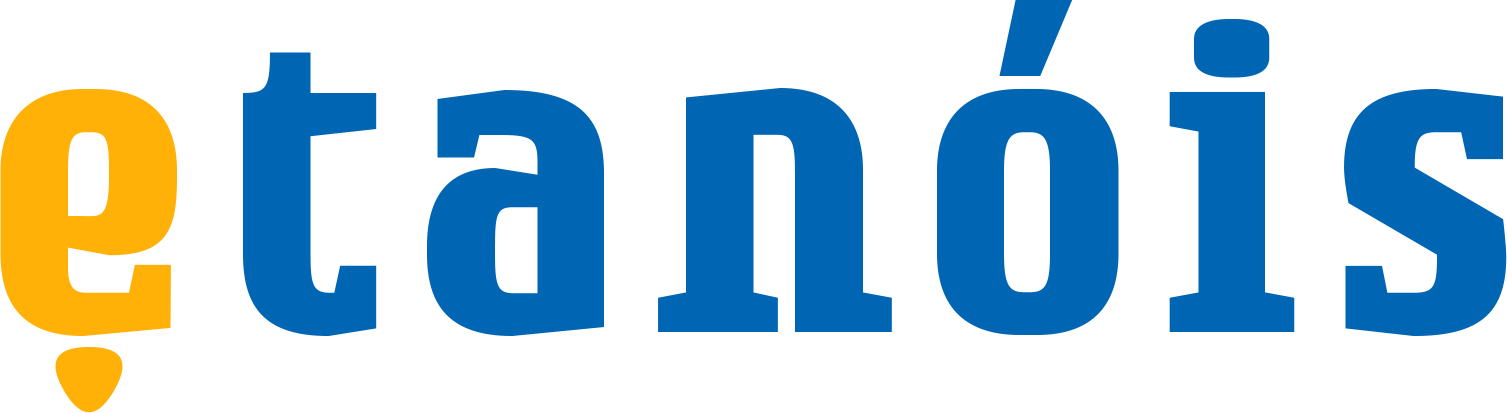
<style>
.page{position:relative;width:1507px;height:413px;background:#ffffff}
.page>*{position:absolute;margin:0}
.t1{font:450px "RogueSerif-Bold";letter-spacing:0.05em;color:#0065b3}
.t2{font:450px "RogueSerif-Bold";letter-spacing:0.05em;color:#ffb108}
</style>
<div class="page">
<p class="t1" style="left:0px;top:0px;width:1507px;height:336px"><span class="t2">e</span>tanóis</p>
</div>
